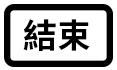
<style>
.page{position:relative;width:117px;height:70px;background:#ffffff}
.page>*{position:absolute;margin:0}
.t1{font:33.9px "NotoSansHant-Bold";color:#000000}
</style>
<div class="page">
<p class="t1" style="left:23px;top:19px;width:67px;height:32px">結束</p>
</div>
